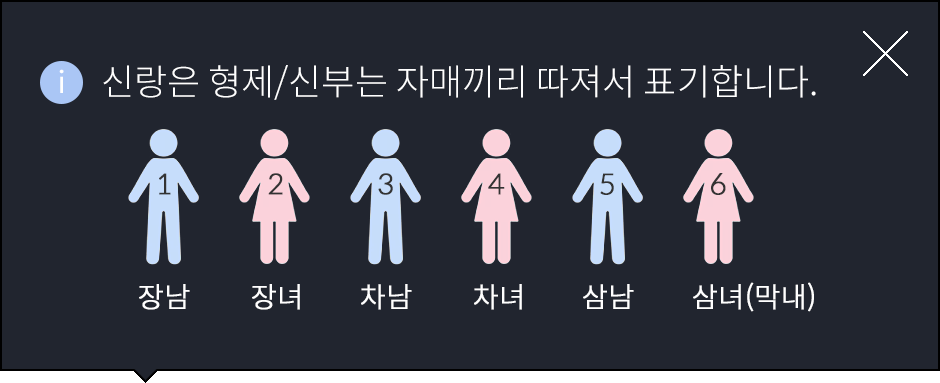
<style>
.page{position:relative;width:940px;height:383px;background:#21252f}
.page>*{position:absolute;margin:0}
.t1{font:36px "SpoqaHanSans-Light";color:#ffffff}
.t2{font:30px "SpoqaHanSans-Regular";color:#ffffff}
.t3{font:28px "SpoqaHanSans-Light";color:#333333;font-weight:bold}
.t4{font:28px "SpoqaHanSans-Light";color:#ffffff;font-weight:bold}
</style>
<div class="page">
<p class="t1" style="left:103px;top:65px;width:713px;height:35px">신랑은 형제/신부는 자매끼리 따져서 표기합니다.</p>
<p class="t2" style="left:59px;top:69px;width:5px;height:24px">i</p>
<p class="t3" style="left:159px;top:173px;width:12px;height:22px">1</p>
<p class="t3" style="left:268px;top:173px;width:15px;height:22px">2</p>
<p class="t3" style="left:378px;top:173px;width:15px;height:22px">3</p>
<p class="t3" style="left:488px;top:173px;width:17px;height:22px">4</p>
<p class="t3" style="left:600px;top:173px;width:14px;height:22px">5</p>
<p class="t3" style="left:711px;top:173px;width:15px;height:22px">6</p>
<p class="t4" style="left:139px;top:284px;width:51px;height:26px">장남</p>
<p class="t4" style="left:252px;top:284px;width:48px;height:26px">장녀</p>
<p class="t4" style="left:361px;top:284px;width:51px;height:26px">차남</p>
<p class="t4" style="left:474px;top:284px;width:48px;height:26px">차녀</p>
<p class="t4" style="left:583px;top:284px;width:51px;height:25px">삼남</p>
<p class="t4" style="left:693px;top:282px;width:121px;height:30px">삼녀(막내)</p>
</div>
